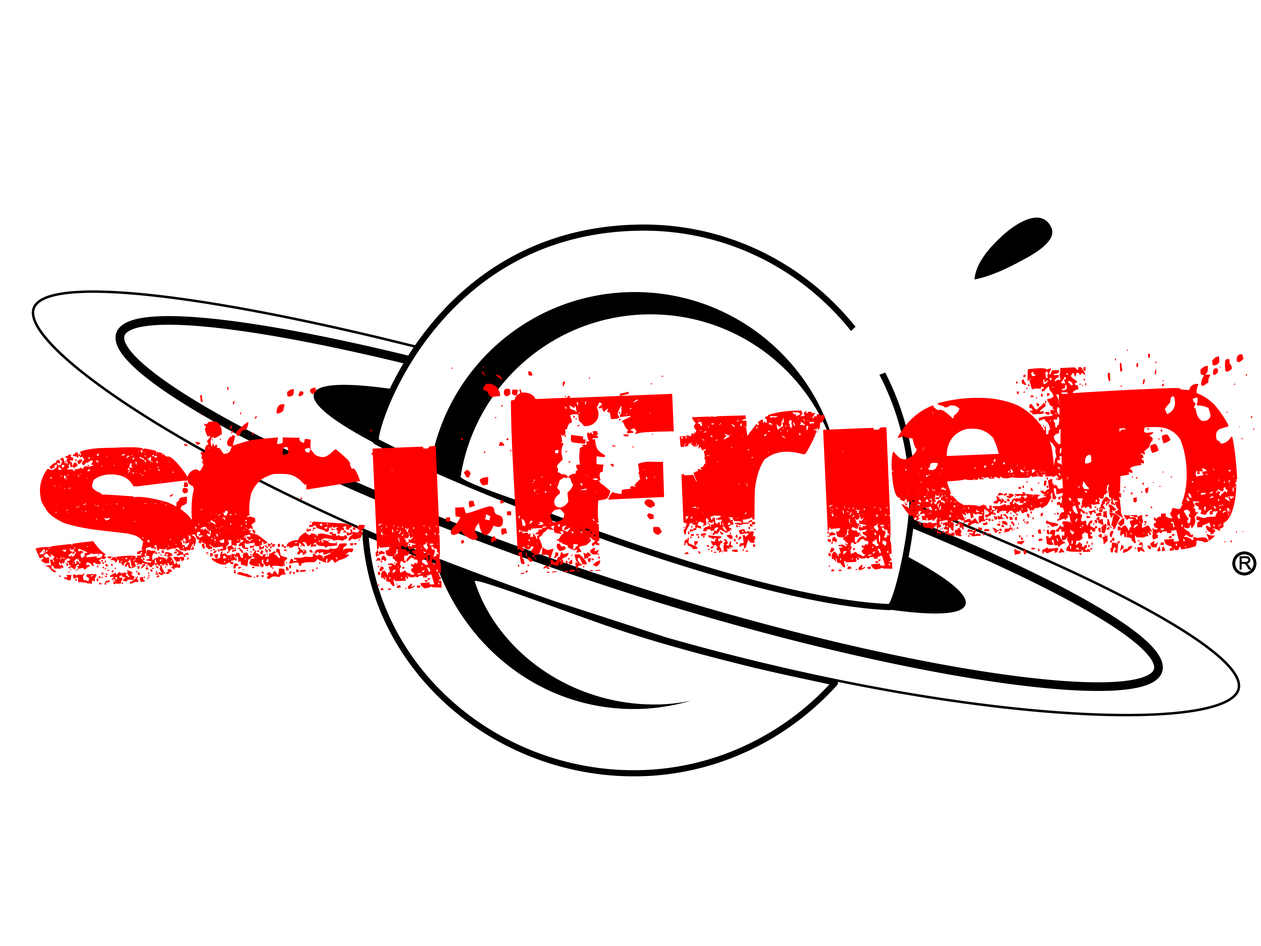
<style>
.page{position:relative;width:1261px;height:946px;background:#ffffff}
.page>*{position:absolute;margin:0}
.t1{font:182px "Abite";color:#ff0000;font-weight:bold}
.t2{font:182px "Acidic";color:#ff0000;font-weight:bold}
.t3{font:18.1px "ArialMT";color:#090e12;font-weight:bold}
</style>
<div class="page">
<p class="t1" style="left:35px;top:349px;width:1219px;height:241px;rotate:-2deg">Sci<span class="t2">-</span>Fried</p>
<p class="t3" style="left:1239px;top:556px;width:12px;height:14px">R</p>
</div>
